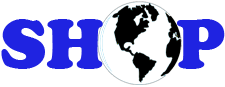
<style>
.page{position:relative;width:225px;height:87px;background:#ffffff}
.page>*{position:absolute;margin:0}
.t1{font:72px "CooperBlack";color:#1f23e1}
</style>
<div class="page">
<p class="t1" style="left:1px;top:19px;width:224px;height:50px">SH    P</p>
</div>
